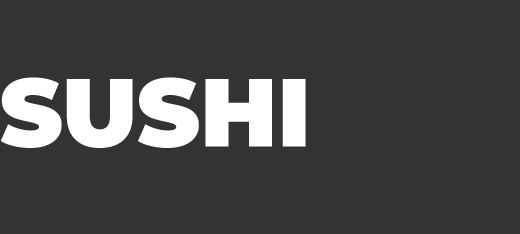
<style>
.page{position:relative;width:520px;height:234px;background:#333333}
.page>*{position:absolute;margin:0}
.t1{font:96px "Montserrat-Black";color:#ffffff;text-transform:uppercase}
</style>
<div class="page">
<p class="t1" style="left:0px;top:77px;width:306px;height:71px">sushi</p>
</div>
